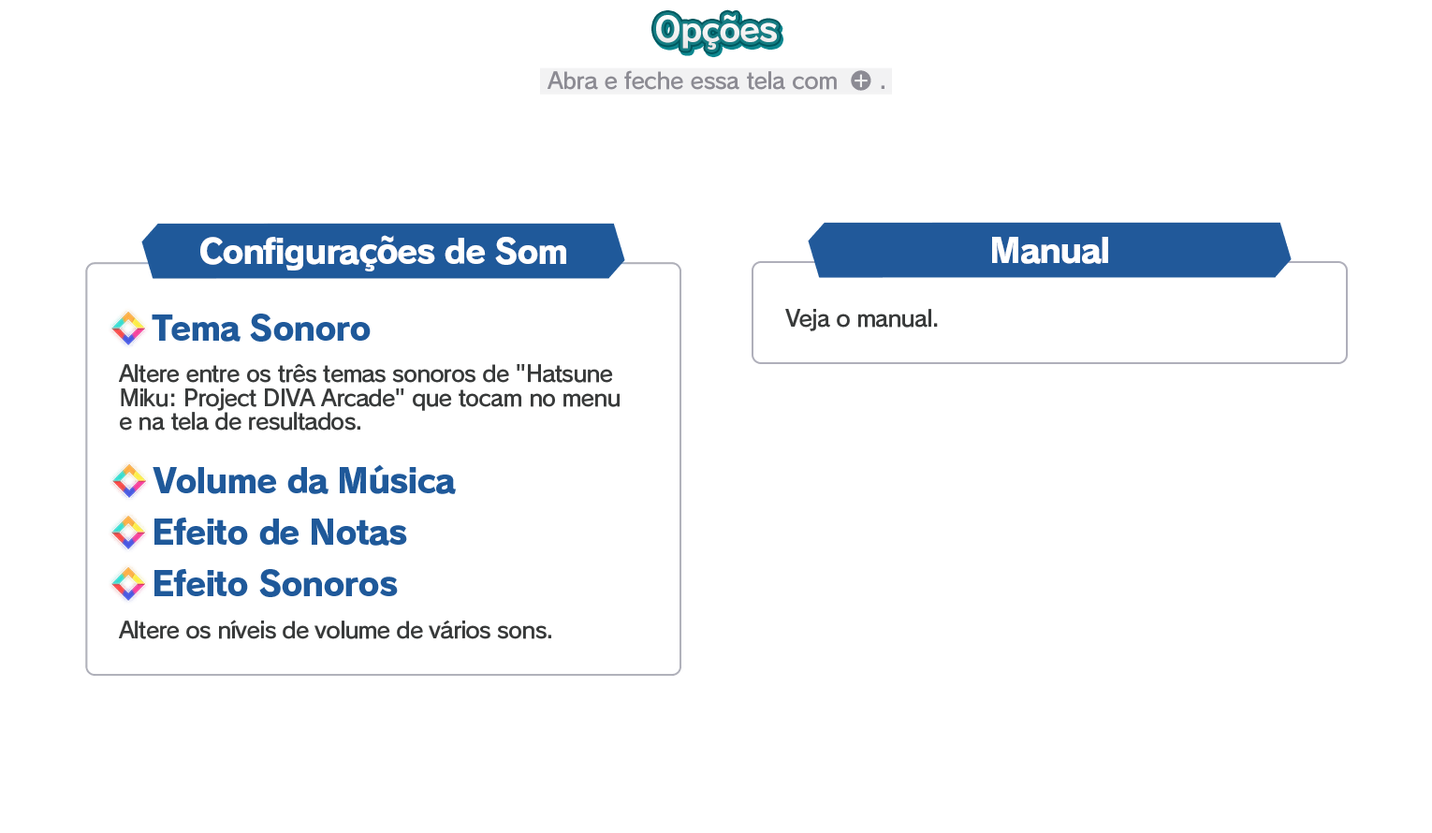
<style>
.page{position:relative;width:1432px;height:833px;background:#ffffff}
.page>*{position:absolute;margin:0}
.t1{font:33.7px "RodinPro-B";letter-spacing:-0.039em;color:#f2f3f3}
.t2{font:22.5px "RodinPro-DB";letter-spacing:-0.025em;color:#8c8b93}
.t3{font:33.7px "RodinPro-EB";letter-spacing:-0.048em;color:#ffffff}
.t4{font:33.7px "RodinPro-EB";letter-spacing:-0.04em;color:#1f599a}
.t5{font:22.5px "RodinPro-DB";letter-spacing:-0.04em;color:#383a3a}
.t6{font:22.5px/23.7px "RodinPro-DB";letter-spacing:-0.04em;color:#383a3a}
</style>
<div class="page">
<p class="t1" style="left:656px;top:14px;width:121px;height:36px">Opções</p>
<p class="t2" style="left:547px;top:70px;width:290px;height:20px">Abra e feche essa tela com</p>
<p class="t2" style="left:881px;top:85px;width:3px;height:4px">.</p>
<p class="t3" style="left:200px;top:235px;width:366px;height:36px">Configurações de Som</p>
<p class="t3" style="left:992px;top:237px;width:116px;height:27px">Manual</p>
<p class="t4" style="left:152px;top:313px;width:219px;height:29px">Tema Sonoro</p>
<p class="t5" style="left:785px;top:309px;width:153px;height:22px">Veja o manual.</p>
<p class="t6" style="left:119px;top:364px;width:500px;height:66px">Altere entre os três temas sonoros de "Hatsune<br>Miku: Project DIVA Arcade" que tocam no menu<br>e na tela de resultados.</p>
<p class="t4" style="left:153px;top:464px;width:303px;height:30px">Volume da Música</p>
<p class="t4" style="left:154px;top:517px;width:253px;height:29px">Efeito de Notas</p>
<p class="t4" style="left:154px;top:569px;width:244px;height:28px">Efeito Sonoros</p>
<p class="t5" style="left:119px;top:619px;width:432px;height:20px">Altere os níveis de volume de vários sons.</p>
</div>
